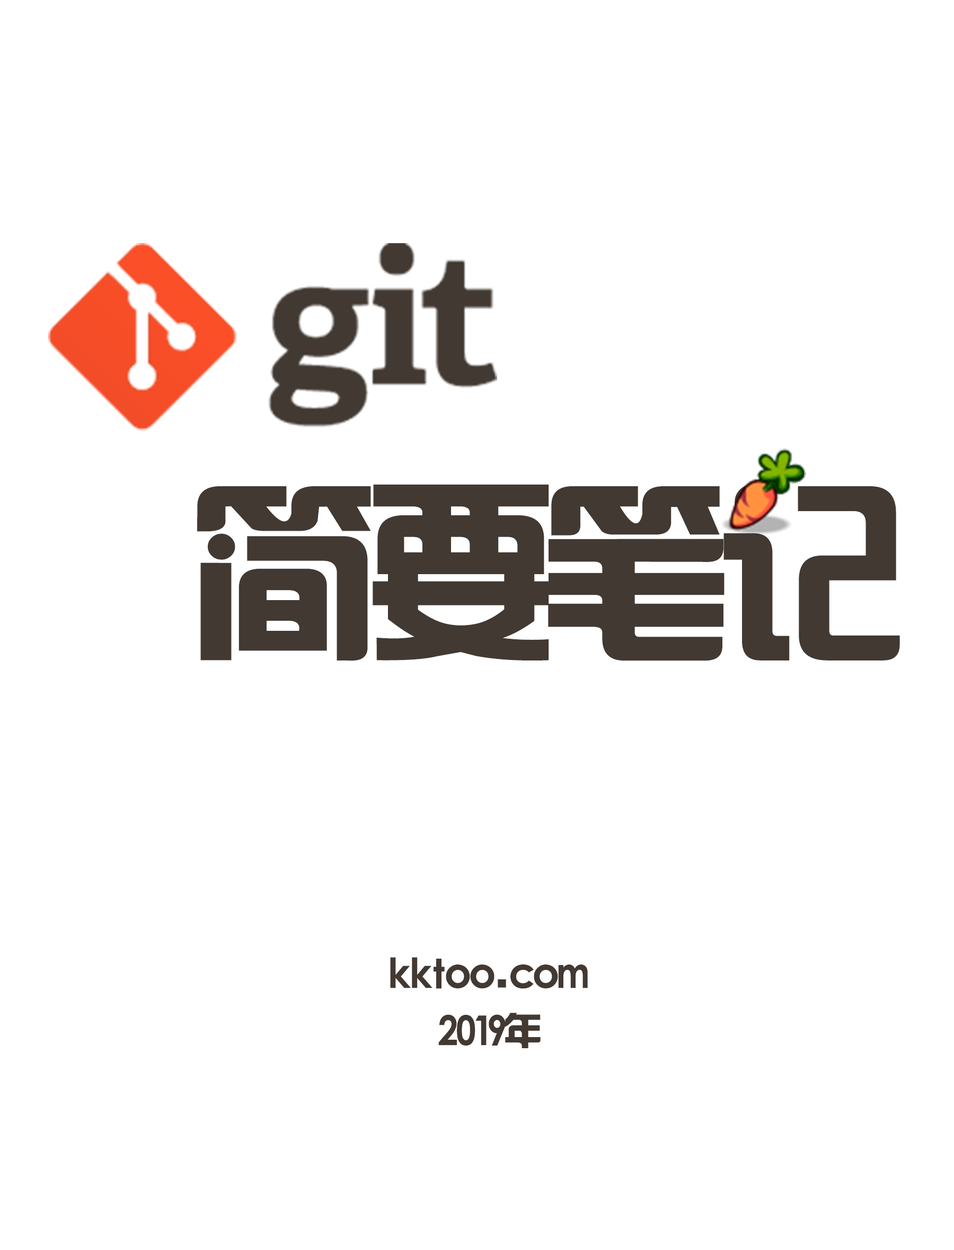
<style>
.page{position:relative;width:954px;height:1250px;background:#ffffff}
.page>*{position:absolute;margin:0}
.t1{font:190.7px "hzgb";letter-spacing:-0.08em;color:#413932}
.t2{font:38.1px "hzgb";letter-spacing:-0.08em;color:#413932}
</style>
<div class="page">
<p class="t1" style="left:197px;top:484px;width:703px;height:177px">简要笔记</p>
<p class="t2" style="left:390px;top:957px;width:198px;height:32px">kktoo.com</p>
<p class="t2" style="left:438px;top:1013px;width:102px;height:36px">2019年</p>
</div>
